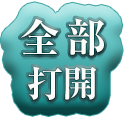
<style>
.page{position:relative;width:124px;height:117px}
.page>*{position:absolute;margin:0}
.t1{font:40px/48px "RyuminPr6N-ExBold";letter-spacing:0.2em;color:#fbfbf9}
.t2{font:36px/48px "RyuminPr6N-ExBold";color:#fbfbf9}
</style>
<div class="page">
<p class="t1" style="left:20px;top:18px;width:84px;height:82px;text-align:center">全部<br><span class="t2">打開</span></p>
</div>
